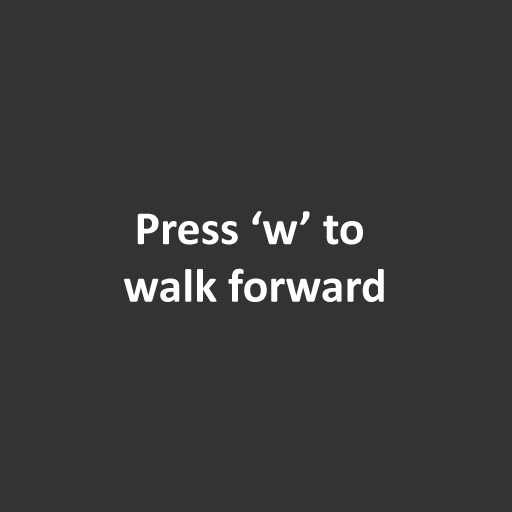
<style>
.page{position:relative;width:512px;height:512px;background:#333333}
.page>*{position:absolute;margin:0}
.t1{font:48px "Calibri-Bold";color:#ffffff}
</style>
<div class="page">
<p class="t1" style="left:124px;top:211px;width:260px;height:91px;text-align:center">Press ‘w’ to <br>walk forward</p>
</div>
